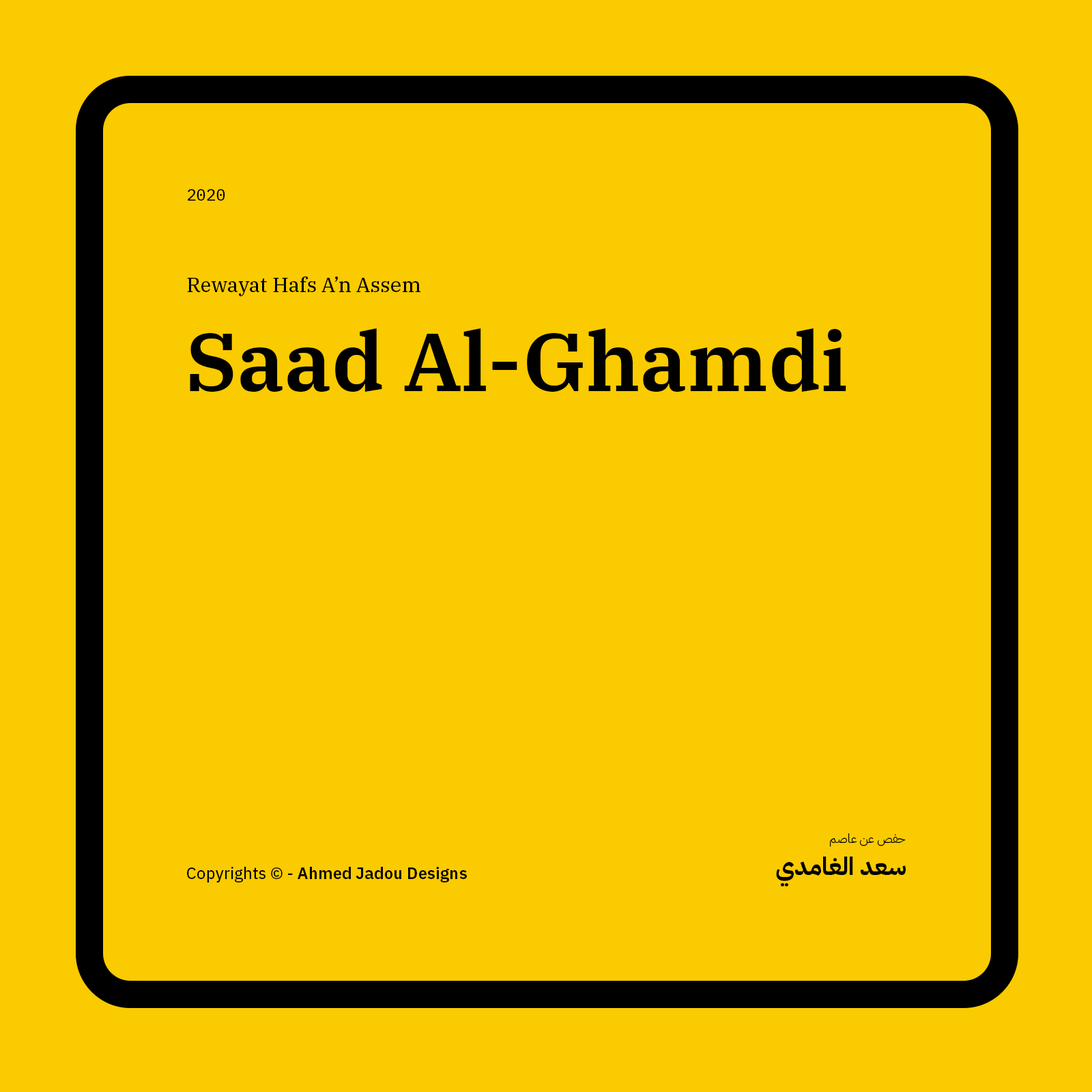
<style>
.page{position:relative;width:1092px;height:1092px;background:#facb00}
.page>*{position:absolute;margin:0}
.t1{font:16.4px "IBMPlexMono-Text";color:#000000}
.t2{font:20.5px "IBMPlexSerif-Text";color:#000000}
.t3{font:81.9px "IBMPlexSerif-SemiBold";color:#000000}
.t4{font:12.3px "IBMPlexArabic-Light";color:#000000}
.t5{font:24.6px "IBMPlexArabic-Bold";color:#000000}
.t6{font:16.4px "IBMPlexSans-SemiBold";color:#000000}
.t7{font:16.4px "IBMPlexSans-Text";color:#000000}
</style>
<div class="page">
<p class="t1" style="left:188px;top:189px;width:37px;height:12px">2020</p>
<p class="t2" style="left:187px;top:276px;width:233px;height:20px">Rewayat Hafs A’n Assem</p>
<p class="t3" style="left:190px;top:328px;width:656px;height:64px">Saad Al-Ghamdi</p>
<p class="t4" style="left:830px;top:833px;width:76px;height:14px">حفص عن عاصم</p>
<p class="t5" style="left:776px;top:857px;width:130px;height:30px">سعد الغامدي</p>
<p class="t6" style="left:187px;top:867px;width:280px;height:15px"><span class="t7">Copyrights © - </span>Ahmed Jadou Designs</p>
</div>
